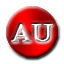
<style>
.page{position:relative;width:64px;height:64px;background:#ffffff}
.page>*{position:absolute;margin:0}
.t1{font:24px "Castellar";font-variant:small-caps;font-weight:bold}
</style>
<div class="page">
<p class="t1" style="left:11px;top:24px;width:42px;height:18px">AU</p>
</div>
